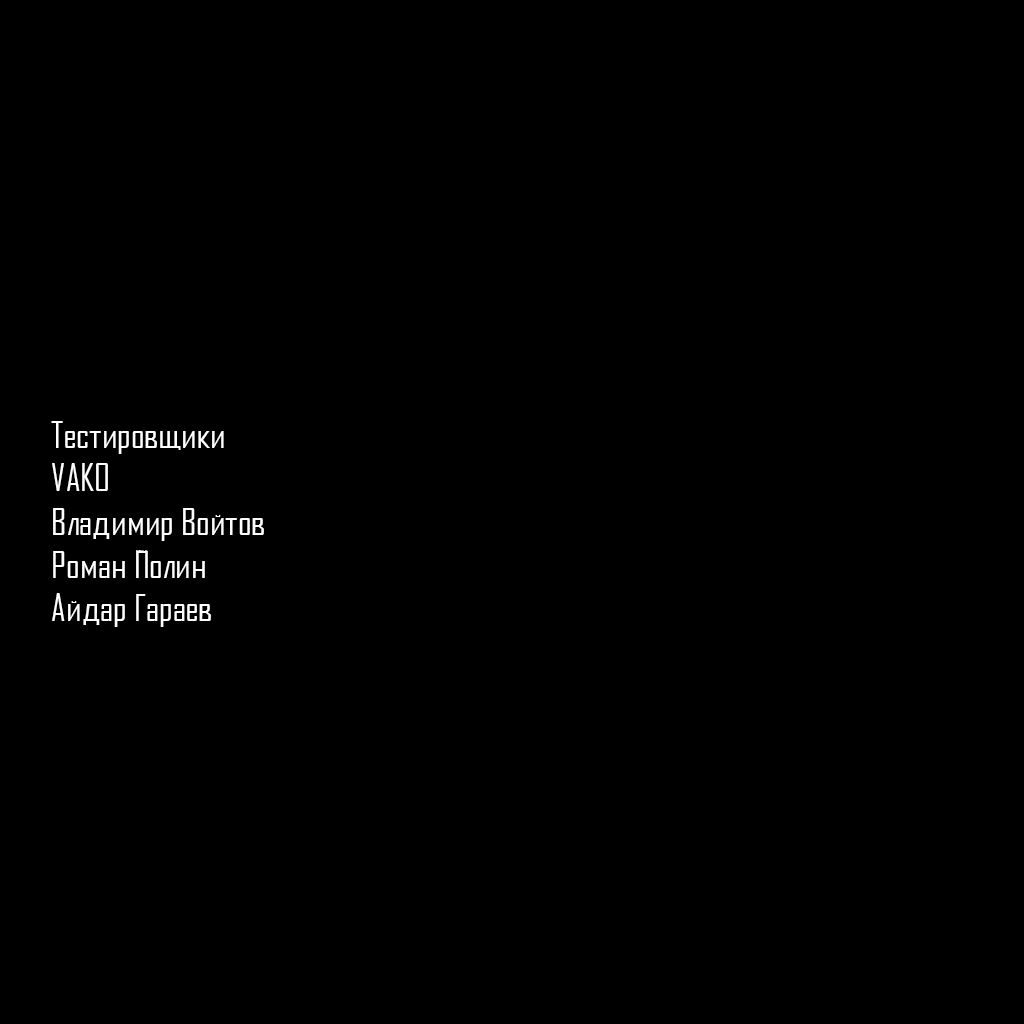
<style>
.page{position:relative;width:1024px;height:1024px;background:#000000}
.page>*{position:absolute;margin:0}
.t1{font:36px "AgencyFBCyrillic";color:#ffffff}
</style>
<div class="page">
<p class="t1" style="left:51px;top:421px;width:213px;height:206px">Тестировщики<br>VAKO<br>Владимир Войтов<br>Роман Полин<br>Айдар Гараев</p>
</div>
